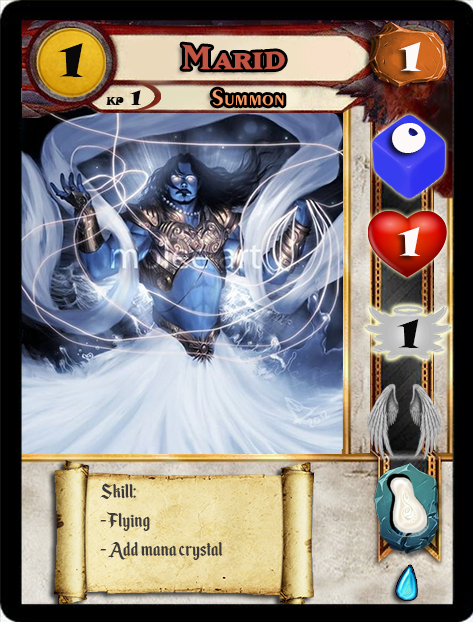
<style>
.page{position:relative;width:473px;height:622px}
.page>*{position:absolute;margin:0}
.t1{font:46.6px "SnapITC-Regular";color:#090909;scale:1.05 1}
.t2{font:40px "MatrixBoldSmallCaps";color:#c25443;scale:1.06 1}
.t3{font:40px "SnapITC-Regular";color:#fef9f9;scale:1.05 1}
.t4{font:22.7px "Exotic350BT-DemiBold";color:#f89c64;scale:1.06 1}
.t5{font:20.5px "SnapITC-Regular";color:#090909}
.t6{font:40px "SnapITC-Regular";color:#090909;scale:1.05 1}
.t7{font:24px "EnchantedLand";color:#3e3939}
</style>
<div class="page">
<p class="t1" style="left:58px;top:43px;width:25px;height:34px">1</p>
<p class="t2" style="left:182px;top:44px;width:103px;height:26px">Marid</p>
<p class="t3" style="left:399px;top:42px;width:22px;height:29px">1</p>
<p class="t4" style="left:212px;top:89px;width:72px;height:17px">Summon</p>
<p class="t5" style="left:130px;top:90px;width:11px;height:15px">1</p>
<p class="t3" style="left:392px;top:123px;width:34px;height:30px">0</p>
<p class="t3" style="left:398px;top:227px;width:22px;height:29px">1</p>
<p class="t6" style="left:397px;top:319px;width:22px;height:29px">1</p>
<p class="t7" style="left:100px;top:483px;width:123px;height:77px">Skill:<br>- Flying<br>- Add mana crystal</p>
</div>
